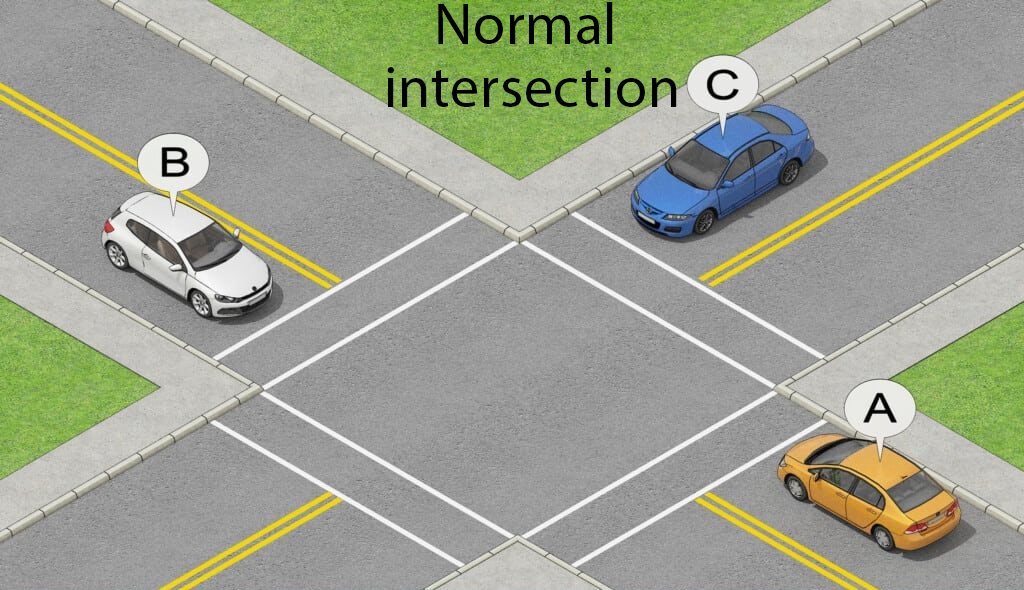
<style>
.page{position:relative;width:1024px;height:590px}
.page>*{position:absolute;margin:0}
.t1{font:58.3px/62.5px "MyriadPro-Regular";letter-spacing:0.01em;color:#000000}
</style>
<div class="page">
<p class="t1" style="left:387px;top:2px;width:290px;height:105px;text-align:center">Normal <br>intersection</p>
</div>
